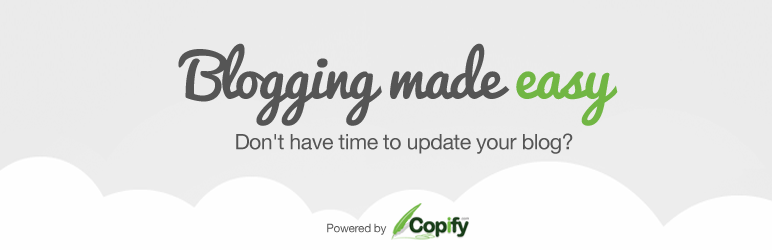
<style>
.page{position:relative;width:772px;height:250px;background:#ebebeb}
.page>*{position:absolute;margin:0}
.t1{font:59px "Pacifico-Regular";letter-spacing:-0.025em;color:#555555}
.t2{font:59px "Pacifico-Regular";letter-spacing:-0.025em;color:#71b644}
.t3{font:21.5px "HelveticaNeue";letter-spacing:-0.025em;color:#555555}
.t4{font:11.7px "HelveticaNeue";letter-spacing:-0.025em;color:#555555}
</style>
<div class="page">
<p class="t1" style="left:178px;top:43px;width:440px;height:83px">Blogging made <span class="t2">easy</span></p>
<p class="t3" style="left:236px;top:133px;width:337px;height:21px">Don't have time to update your blog?</p>
<p class="t4" style="left:327px;top:223px;width:60px;height:12px">Powered by</p>
</div>
